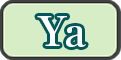
<style>
.page{position:relative;width:121px;height:60px;background:#d6edc6}
.page>*{position:absolute;margin:0}
.t1{font:40px "RyuminPro-ExBold";color:#ffffff}
</style>
<div class="page">
<p class="t1" style="left:37px;top:16px;width:49px;height:31px">Ya</p>
</div>
